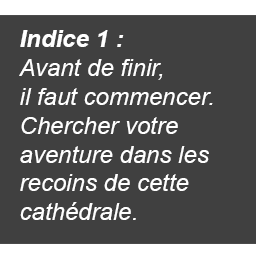
<style>
.page{position:relative;width:256px;height:256px;background:#404040}
.page>*{position:absolute;margin:0}
.t1{font:24px "Arial-ItalicMT";color:#ffffff}
.t2{font:24px "Arial-BoldItalicMT";color:#ffffff}
</style>
<div class="page">
<p class="t1" style="left:19px;top:30px;width:194px;height:190px"><span class="t2">Indice 1 :<br></span>Avant de finir,<br>il faut commencer.<br>Chercher votre<br>aventure dans les<br>recoins de cette<br>cathédrale.</p>
</div>
